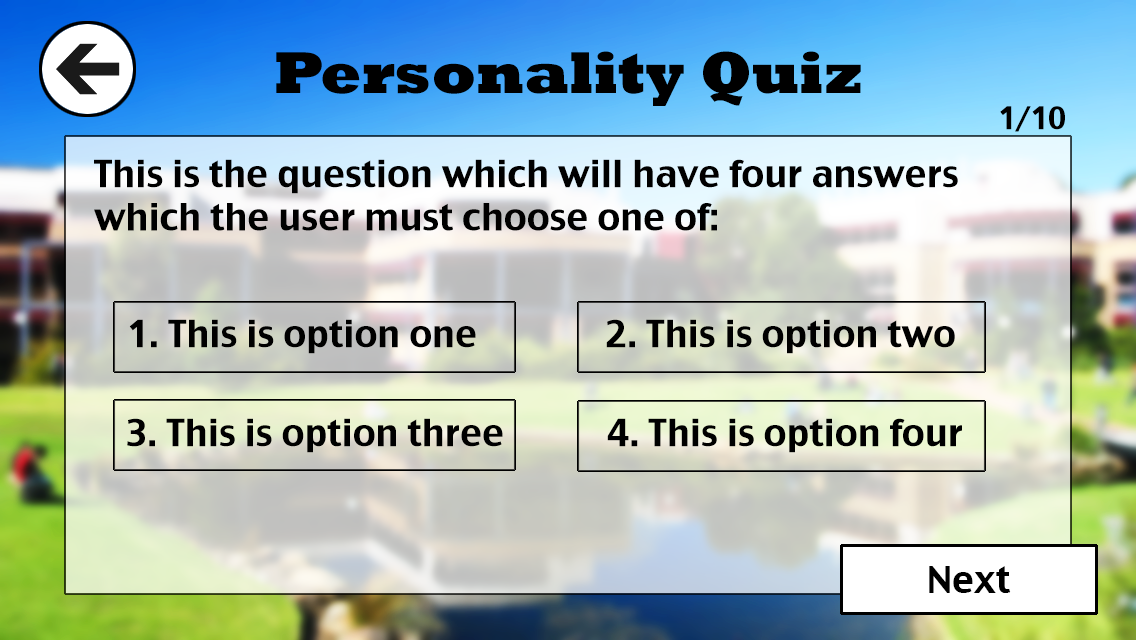
<style>
.page{position:relative;width:1136px;height:640px}
.page>*{position:absolute;margin:0}
.t1{font:60px "Rockwell-ExtraBold";color:#000000}
.t2{font:30px "CharcoalCY";color:#000000}
.t3{font:36px "CharcoalCY";color:#000000}
</style>
<div class="page">
<p class="t1" style="left:276px;top:51px;width:585px;height:55px">Personality Quiz</p>
<p class="t2" style="left:1000px;top:106px;width:65px;height:26px">1/10</p>
<p class="t3" style="left:94px;top:159px;width:864px;height:72px">This is the question which will have four answers <br>which the user must choose one of:</p>
<p class="t3" style="left:129px;top:319px;width:347px;height:35px">1. This is option one</p>
<p class="t3" style="left:606px;top:319px;width:349px;height:35px">2. This is option two</p>
<p class="t3" style="left:127px;top:418px;width:376px;height:35px">3. This is option three</p>
<p class="t3" style="left:607px;top:418px;width:355px;height:35px">4. This is option four</p>
<p class="t3" style="left:929px;top:566px;width:82px;height:27px">Next</p>
</div>
